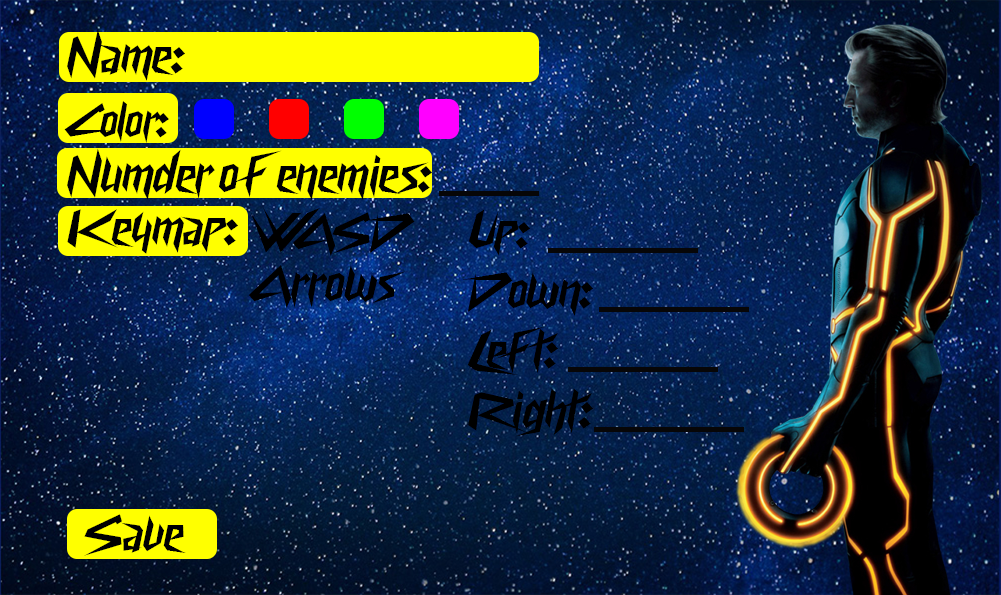
<style>
.page{position:relative;width:1001px;height:595px}
.page>*{position:absolute;margin:0}
.t1{font:45.8px "CyberwayRiders";color:#000000}
.t2{font:50px "CyberwayRiders";color:#000000}
</style>
<div class="page">
<p class="t1" style="left:64px;top:101px;width:105px;height:43px">Color:</p>
<p class="t2" style="left:67px;top:148px;width:365px;height:52px">Numder of  enemies:</p>
<p class="t2" style="left:67px;top:209px;width:171px;height:45px">Keymap:</p>
<p class="t2" style="left:251px;top:207px;width:164px;height:50px">WASD</p>
<p class="t2" style="left:462px;top:209px;width:131px;height:228px">Up:<br>Down:<br>Left:<br>Right:</p>
<p class="t2" style="left:248px;top:265px;width:157px;height:44px">Arrows</p>
<p class="t2" style="left:84px;top:514px;width:102px;height:42px">Save</p>
</div>
